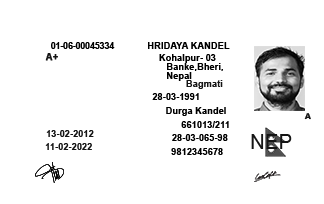
<style>
.page{position:relative;width:324px;height:204px;background:#ffffff}
.page>*{position:absolute;margin:0}
.t1{font:9.3px "Arial-BoldMT";color:#151515;font-weight:bold}
.t2{font:9.3px "Arial-BoldMT";color:#000000;font-weight:bold}
.t3{font:9.3px "Arial-BoldMT";letter-spacing:-0.04em;color:#000000}
.t4{font:9.3px "Arial-BoldMT";letter-spacing:-0.04em;color:#000000;font-weight:bold}
.t5{font:9.3px "Arial-BoldMT";color:#000000}
.t6{font:9.3px/8.7px "Arial-BoldMT";color:#000000}
.t7{font:9.3px/8.7px "Arial-BoldMT";color:#000000;font-weight:bold}
.t8{font:9.3px "Arial-BoldMT";color:#151515}
.t9{font:8px "Arial-Black";color:#151515}
.t10{font:8px "Arial-Black";color:#000000;font-weight:bold}
.t11{font:19.8px "ArialMT";color:#151515;scale:1.04 1}
</style>
<div class="page">
<p class="t1" style="left:45px;top:53px;width:13px;height:8px"><span class="t2">           </span>A+</p>
<p class="t3" style="left:51px;top:42px;width:64px;height:7px"><span class="t4">          </span> 01-06-00045334</p>
<p class="t5" style="left:148px;top:42px;width:82px;height:7px"><span class="t2">     </span> HRIDAYA KANDEL</p>
<p class="t6" style="left:159px;top:54px;width:64px;height:27px"><span class="t7">          </span>Kohalpur- 03<br>        Banke,Bheri,<br>        Nepal</p>
<p class="t8" style="left:186px;top:80px;width:37px;height:9px"><span class="t2">              </span>Bagmati</p>
<p class="t5" style="left:152px;top:93px;width:47px;height:7px"><span class="t2">             </span>28-03-1991</p>
<p class="t5" style="left:166px;top:107px;width:60px;height:9px"><span class="t2">                  </span>Durga Kandel</p>
<p class="t9" style="left:304px;top:113px;width:7px;height:7px"><span class="t10">           </span>A</p>
<p class="t5" style="left:181px;top:121px;width:48px;height:7px"><span class="t2">                   </span>661013/211</p>
<p class="t8" style="left:46px;top:130px;width:48px;height:7px"><span class="t2">        </span>13-02-2012</p>
<p class="t5" style="left:172px;top:134px;width:56px;height:7px"><span class="t2">               </span>28-03-065-98</p>
<p class="t11" style="left:251px;top:134px;width:41px;height:15px">NEP</p>
<p class="t8" style="left:45px;top:143px;width:47px;height:7px"><span class="t2">        </span>11-02-2022</p>
<p class="t5" style="left:171px;top:148px;width:52px;height:7px"><span class="t2">             </span>9812345678</p>
</div>
